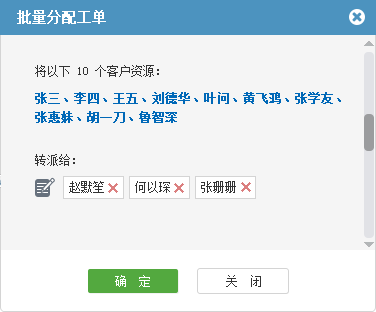
<style>
.page{position:relative;width:376px;height:312px;background:#f5f5f5}
.page>*{position:absolute;margin:0}
.t1{font:14px "SimSun";color:#ffffff;font-weight:bold}
.t2{font:12px "SimSun";color:#333333}
.t3{font:12px/19px "SimSun";color:#0068b7;font-weight:bold}
.t4{font:12px "SimSun";color:#ffffff}
</style>
<div class="page">
<p class="t1" style="left:17px;top:10px;width:89px;height:14px">批量分配工单</p>
<p class="t2" style="left:35px;top:65px;width:124px;height:12px">将以下 10 个客户资源：</p>
<p class="t3" style="left:35px;top:92px;width:306px;height:31px">张三、李四、王五、刘德华、叶问、黄飞鸿、张学友、<br>张惠妹、胡一刀、鲁智深</p>
<p class="t2" style="left:35px;top:154px;width:40px;height:12px">转派给：</p>
<p class="t2" style="left:69px;top:181px;width:35px;height:12px">赵默笙</p>
<p class="t2" style="left:135px;top:181px;width:35px;height:12px">何以琛</p>
<p class="t2" style="left:201px;top:181px;width:35px;height:12px">张珊珊</p>
<p class="t4" style="left:115px;top:275px;width:35px;height:12px">确  定</p>
<p class="t2" style="left:226px;top:275px;width:35px;height:12px">关　闭</p>
</div>
